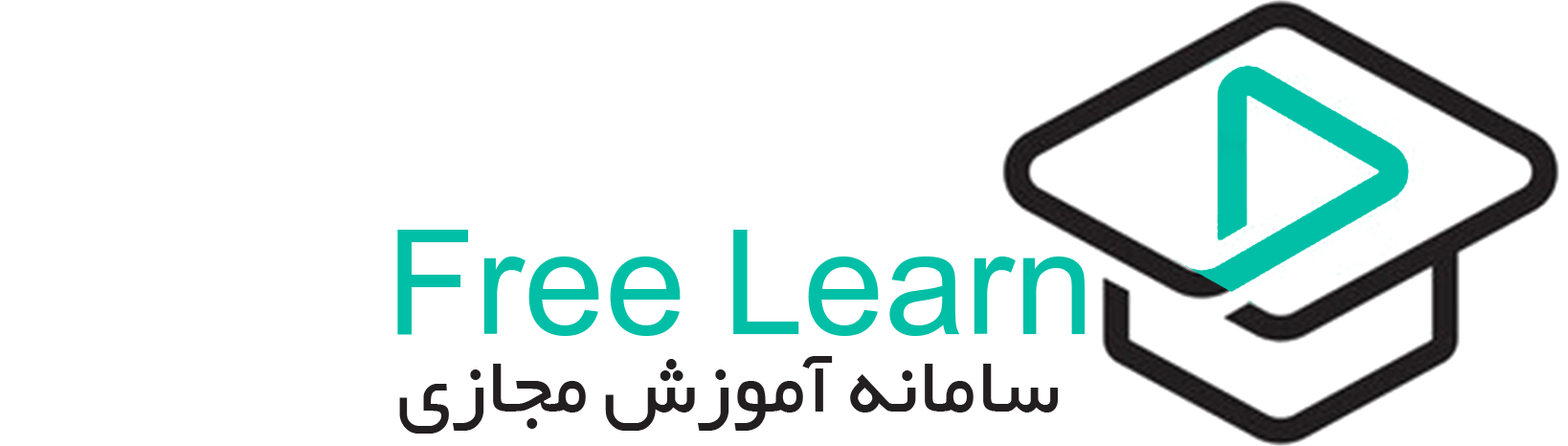
<style>
.page{position:relative;width:1568px;height:446px;background:#ffffff}
.page>*{position:absolute;margin:0}
.t1{font:182px "IRYekan";color:#00bfa6}
.t2{font:68.9px "IRYekan";color:#231f20}
</style>
<div class="page">
<p class="t1" style="left:397px;top:230px;width:689px;height:106px">Free Learn</p>
<p class="t2" style="left:399px;top:356px;width:659px;height:78px">سامانه آموزش مجازی</p>
</div>
